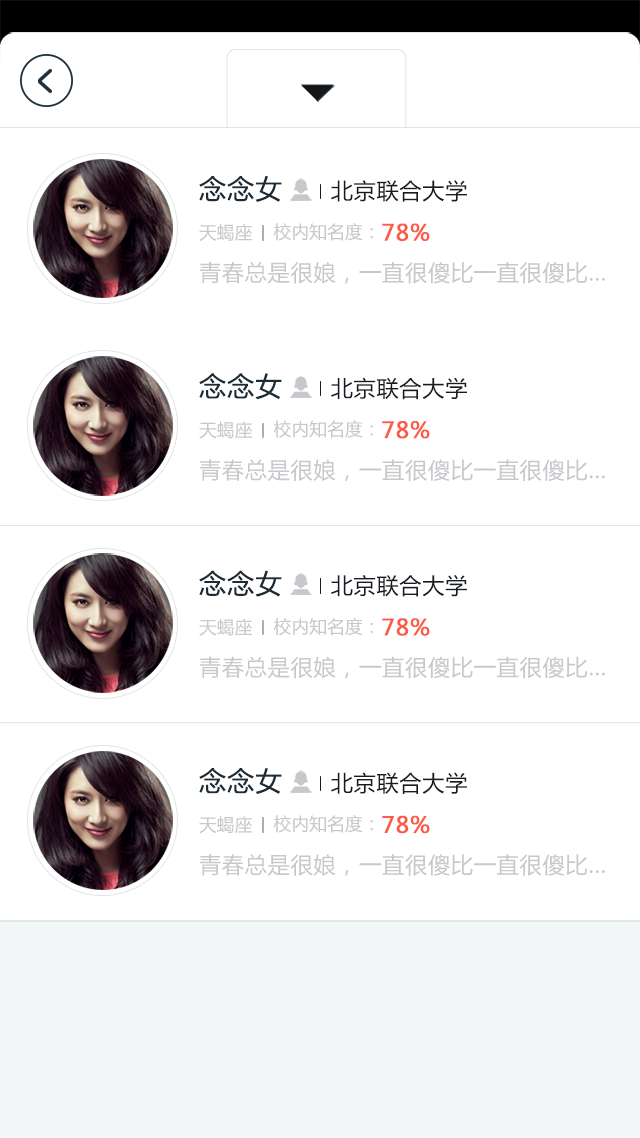
<style>
.page{position:relative;width:640px;height:1138px;background:#ffffff}
.page>*{position:absolute;margin:0}
.t1{font:26.7px "MicrosoftYaHei";letter-spacing:0.05em;color:#1d2b35}
.t2{font:22.2px "MicrosoftYaHei";letter-spacing:0.025em;color:#171b22}
.t3{font:17.8px "MicrosoftYaHei";color:#c7c7cc}
.t4{font:22.2px "MicrosoftYaHei";letter-spacing:0.025em;color:#fa5c47;font-weight:bold}
.t5{font:22.2px "MicrosoftYaHei";letter-spacing:0.025em;color:#c7c7cc}
</style>
<div class="page">
<p class="t1" style="left:199px;top:176px;width:83px;height:26px">念念女</p>
<p class="t2" style="left:331px;top:180px;width:136px;height:22px">北京联合大学</p>
<p class="t3" style="left:199px;top:224px;width:53px;height:17px">天蝎座</p>
<p class="t3" style="left:273px;top:223px;width:100px;height:18px">校内知名度：</p>
<p class="t4" style="left:382px;top:223px;width:48px;height:18px">78%</p>
<p class="t5" style="left:199px;top:261px;width:406px;height:23px">青春总是很娘，一直很傻比一直很傻比…</p>
<p class="t1" style="left:199px;top:373px;width:83px;height:27px">念念女</p>
<p class="t2" style="left:331px;top:377px;width:136px;height:23px">北京联合大学</p>
<p class="t3" style="left:199px;top:421px;width:53px;height:18px">天蝎座</p>
<p class="t3" style="left:273px;top:420px;width:100px;height:18px">校内知名度：</p>
<p class="t4" style="left:382px;top:421px;width:48px;height:18px">78%</p>
<p class="t5" style="left:199px;top:459px;width:406px;height:22px">青春总是很娘，一直很傻比一直很傻比…</p>
<p class="t1" style="left:199px;top:570px;width:83px;height:27px">念念女</p>
<p class="t2" style="left:331px;top:575px;width:136px;height:22px">北京联合大学</p>
<p class="t3" style="left:273px;top:617px;width:100px;height:19px">校内知名度：</p>
<p class="t3" style="left:199px;top:618px;width:53px;height:18px">天蝎座</p>
<p class="t4" style="left:382px;top:618px;width:48px;height:18px">78%</p>
<p class="t5" style="left:199px;top:656px;width:406px;height:23px">青春总是很娘，一直很傻比一直很傻比…</p>
<p class="t1" style="left:199px;top:768px;width:83px;height:26px">念念女</p>
<p class="t2" style="left:331px;top:772px;width:136px;height:22px">北京联合大学</p>
<p class="t3" style="left:199px;top:816px;width:53px;height:18px">天蝎座</p>
<p class="t3" style="left:273px;top:815px;width:100px;height:18px">校内知名度：</p>
<p class="t4" style="left:382px;top:815px;width:48px;height:19px">78%</p>
<p class="t5" style="left:199px;top:854px;width:406px;height:22px">青春总是很娘，一直很傻比一直很傻比…</p>
</div>
